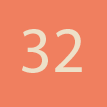
<style>
.page{position:relative;width:107px;height:107px;background:#f07f5f}
.page>*{position:absolute;margin:0}
.t1{font:64px "MyriadPro-Regular";color:#ede0c8}
</style>
<div class="page">
<p class="t1" style="left:22px;top:29px;width:60px;height:44px">32</p>
</div>
